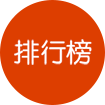
<style>
.page{position:relative;width:105px;height:105px;background:#dd3e00}
.page>*{position:absolute;margin:0}
.t1{font:26px "FZY3K--GBK1-0";color:#ffffff}
</style>
<div class="page">
<p class="t1" style="left:14px;top:39px;width:78px;height:26px">排行榜</p>
</div>
